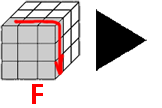
<style>
.page{position:relative;width:162px;height:108px;background:#ffffff}
.page>*{position:absolute;margin:0}
.t1{font:27px "MyriadPro-Regular";color:#ff0000;font-weight:bold}
</style>
<div class="page">
<p class="t1" style="left:32px;top:84px;width:11px;height:20px">F</p>
</div>
